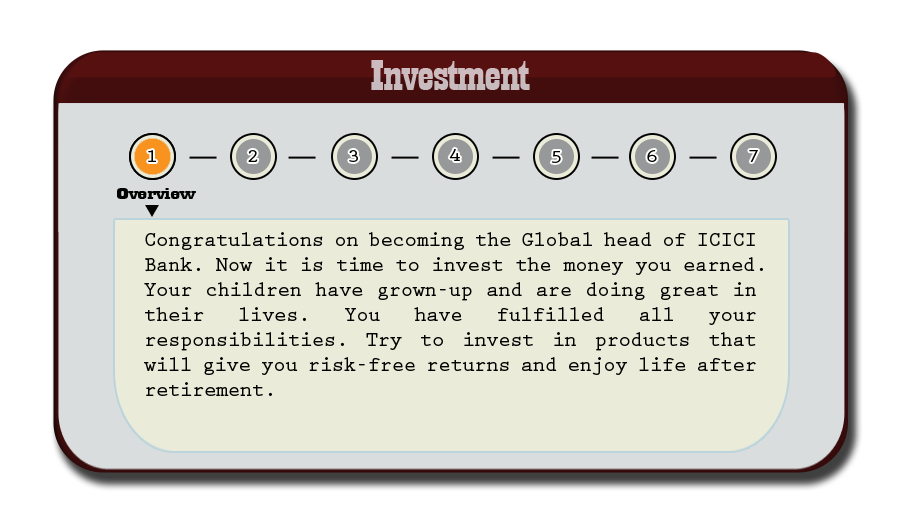
<style>
.page{position:relative;width:910px;height:512px;background:#eaebd8}
.page>*{position:absolute;margin:0}
.t1{font:44.6px "Playbill";letter-spacing:-0.025em;color:#c8bbbe;scale:1.61 1}
.t2{font:18.8px "PrestigeEliteStd-Bd";letter-spacing:-0.025em;color:#020201;scale:1.18 1}
.t3{font:17.3px "Playbill";letter-spacing:-0.025em;color:#020201;scale:2.47 1}
.t4{font:20.8px "PrestigeEliteStd-Bd";letter-spacing:-0.025em;color:#020201}
</style>
<div class="page">
<p class="t1" style="left:371px;top:60px;width:159px;height:30px">Investment</p>
<p class="t2" style="left:148px;top:150px;width:8px;height:12px">1</p>
<p class="t2" style="left:248px;top:150px;width:10px;height:12px">2</p>
<p class="t2" style="left:349px;top:150px;width:9px;height:12px">3</p>
<p class="t2" style="left:449px;top:148px;width:11px;height:13px">4</p>
<p class="t2" style="left:647px;top:150px;width:10px;height:12px">6</p>
<p class="t2" style="left:749px;top:150px;width:9px;height:12px">7</p>
<p class="t2" style="left:551px;top:151px;width:10px;height:12px">5</p>
<p class="t3" style="left:117px;top:188px;width:79px;height:11px">Overview</p>
<p class="t4" style="left:144px;top:232px;width:619px;height:164px;text-align:justify">Congratulations on becoming the Global head of ICICI Bank. Now it is time to invest the money you earned.<br>Your children have grown-up and are doing great in their lives. You have fulfilled all your responsibilities. Try to invest in products that will give you risk-free returns and enjoy life after retirement.</p>
</div>
